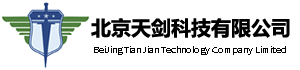
<style>
.page{position:relative;width:300px;height:70px;background:#ffffff}
.page>*{position:absolute;margin:0}
.t1{font:20px "MicrosoftYaHei-Bold";color:#000000}
.t2{font:10px "Candara";color:#000000}
</style>
<div class="page">
<p class="t1" style="left:91px;top:18px;width:199px;height:20px">北京天剑科技有限公司</p>
<p class="t2" style="left:94px;top:46px;width:192px;height:9px">BeiJing Tian Jian Technology Company Limited</p>
</div>
